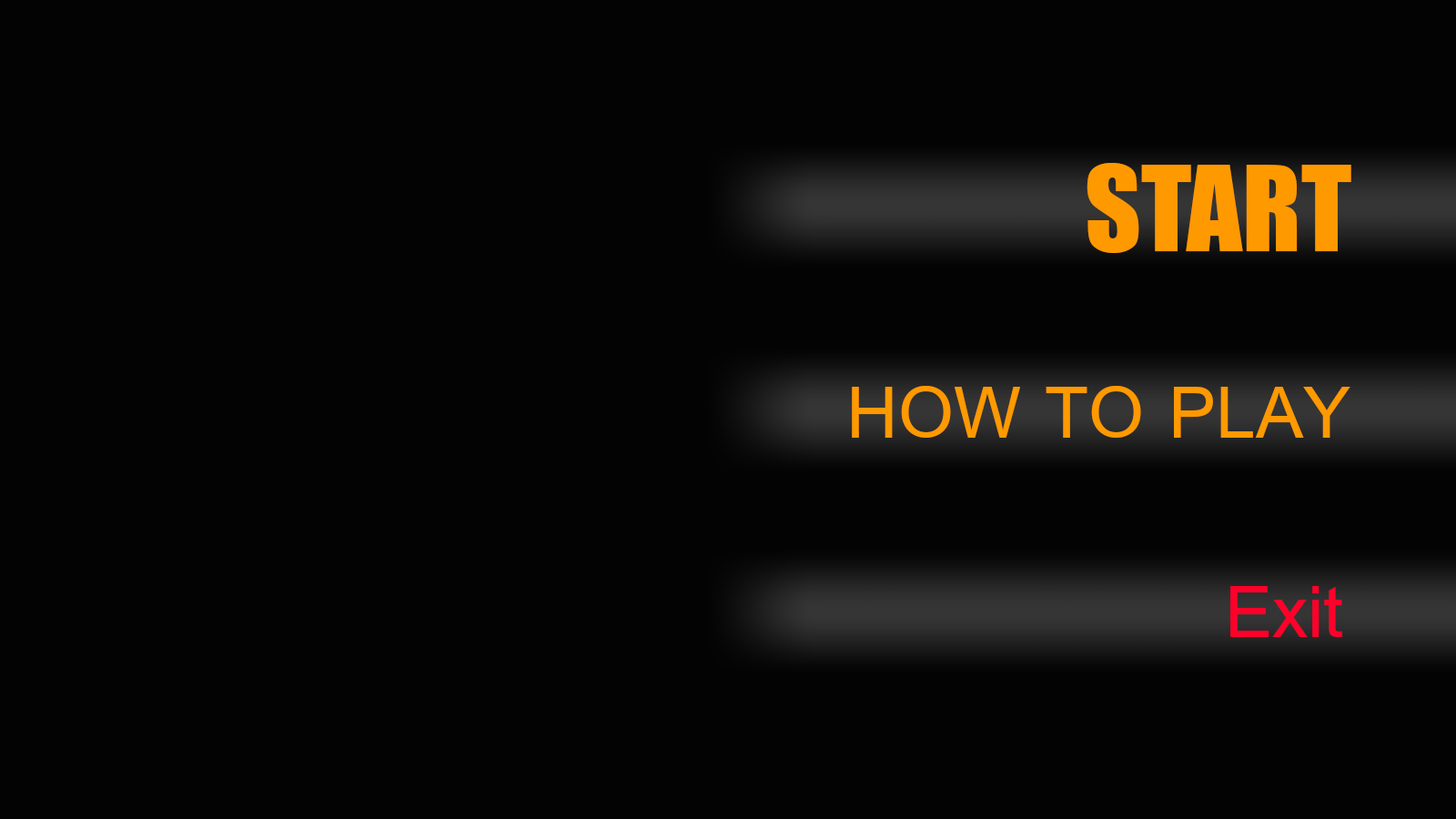
<style>
.page{position:relative;width:1456px;height:819px;background:#030303}
.page>*{position:absolute;margin:0}
.t1{font:109.2px "Impact";color:#ff9900}
.t2{font:109.2px "BrowalliaNew";color:#ff9900}
.t3{font:109.2px "BrowalliaNew";color:#ff002a}
</style>
<div class="page">
<p class="t1" style="left:1087px;top:163px;width:264px;height:90px">START</p>
<p class="t2" style="left:852px;top:386px;width:498px;height:52px">HOW TO PLAY</p>
<p class="t3" style="left:1230px;top:586px;width:113px;height:51px">Exit</p>
</div>
